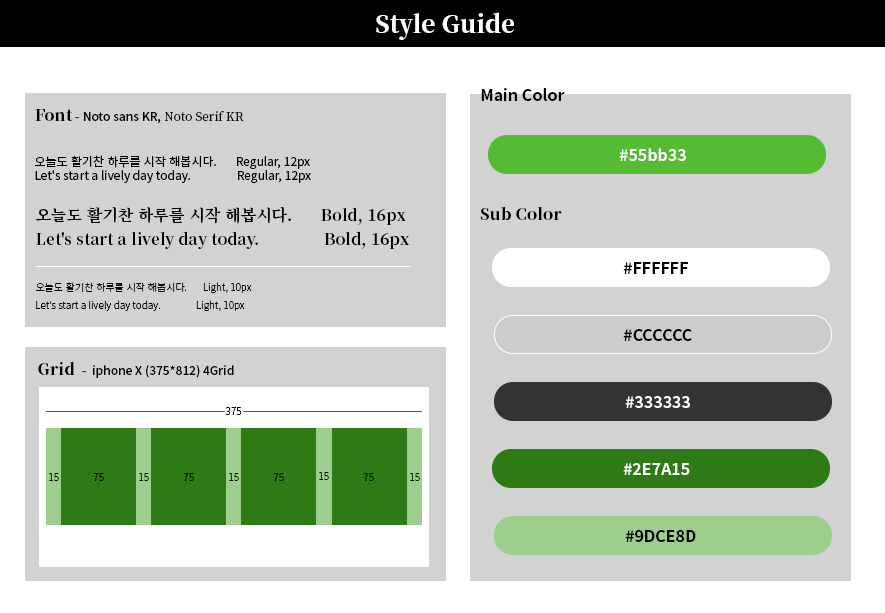
<style>
.page{position:relative;width:885px;height:613px;background:#d2d2d2}
.page>*{position:absolute;margin:0}
.t1{font:24px "NotoSerifKR-Black";color:#ffffff}
.t2{font:16px "NotoSansKR-Bold";color:#000000}
.t3{font:12px "NotoSansKR-Medium";color:#000000}
.t4{font:16px "NotoSerifKR-Black";color:#000000}
.t5{font:12px "NotoSerifKR-Black";color:#000000}
.t6{font:12px "NotoSerifKR-Medium";color:#000000}
.t7{font:16px "NotoSansKR-Bold";color:#ffffff}
.t8{font:12px "NotoSansKR-Regular";color:#000000}
.t9{font:16px/24px "NotoSerifKR-Bold";color:#000000}
.t10{font:10px/18px "NotoSansKR-Light";color:#000000}
.t11{font:16px "NotoSansKR-Bold";color:#010101}
.t12{font:10px "NotoSansKR-Light";color:#000000}
</style>
<div class="page">
<p class="t1" style="left:376px;top:12px;width:138px;height:28px">Style Guide</p>
<p class="t2" style="left:481px;top:88px;width:84px;height:13px">Main Color</p>
<p class="t3" style="left:35px;top:109px;width:209px;height:15px"><span class="t4">Font</span><span class="t5"> - </span>Noto sans KR, <span class="t6">Noto Serif KR</span></p>
<p class="t7" style="left:619px;top:148px;width:67px;height:13px">#55bb33</p>
<p class="t8" style="left:35px;top:155px;width:276px;height:28px">오늘도 활기찬 하루를 시작 해봅시다.       Regular, 12px<br>Let's start a lively day today.                 Regular, 12px</p>
<p class="t9" style="left:35px;top:207px;width:375px;height:42px">오늘도 활기찬 하루를 시작 해봅시다.       Bold, 16px<br>Let's start a lively day today.                Bold, 16px</p>
<p class="t4" style="left:481px;top:206px;width:81px;height:14px">Sub Color</p>
<p class="t2" style="left:623px;top:262px;width:65px;height:12px">#FFFFFF</p>
<p class="t10" style="left:36px;top:282px;width:216px;height:29px">오늘도 활기찬 하루를 시작 해봅시다.       Light, 10px<br>Let's start a lively day today.                Light, 10px</p>
<p class="t11" style="left:623px;top:329px;width:69px;height:12px">#CCCCCC</p>
<p class="t3" style="left:38px;top:361px;width:196px;height:17px"><span class="t4">Grid </span><span class="t5"> -  </span>iphone X (375*812) 4Grid</p>
<p class="t7" style="left:625px;top:396px;width:65px;height:12px">#333333</p>
<p class="t12" style="left:225px;top:407px;width:17px;height:8px">375</p>
<p class="t12" style="left:49px;top:473px;width:10px;height:8px">15</p>
<p class="t12" style="left:93px;top:473px;width:11px;height:8px">75</p>
<p class="t12" style="left:139px;top:473px;width:10px;height:8px">15</p>
<p class="t12" style="left:183px;top:473px;width:11px;height:8px">75</p>
<p class="t12" style="left:229px;top:473px;width:10px;height:8px">15</p>
<p class="t12" style="left:273px;top:473px;width:11px;height:8px">75</p>
<p class="t12" style="left:319px;top:472px;width:10px;height:8px">15</p>
<p class="t12" style="left:363px;top:473px;width:11px;height:8px">75</p>
<p class="t12" style="left:410px;top:473px;width:10px;height:8px">15</p>
<p class="t7" style="left:623px;top:463px;width:67px;height:12px">#2E7A15</p>
<p class="t11" style="left:625px;top:530px;width:71px;height:12px">#9DCE8D</p>
</div>
